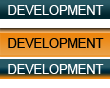
<style>
.page{position:relative;width:110px;height:88px;background:#ffffff}
.page>*{position:absolute;margin:0}
.t1{font:12.7px "ArialMT";color:#ffffff}
.t2{font:12.7px "ArialMT";color:#000000}
</style>
<div class="page">
<p class="t1" style="left:8px;top:5px;width:96px;height:10px">DEVELOPMENT</p>
<p class="t2" style="left:8px;top:38px;width:96px;height:10px">DEVELOPMENT</p>
<p class="t1" style="left:8px;top:64px;width:96px;height:10px">DEVELOPMENT</p>
</div>
